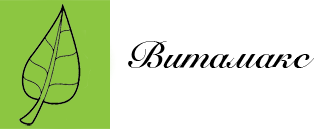
<style>
.page{position:relative;width:322px;height:129px;background:#ffffff}
.page>*{position:absolute;margin:0}
.t1{font:38px "SnellRoundhand-Bold";color:#000000}
</style>
<div class="page">
<p class="t1" style="left:128px;top:41px;width:186px;height:27px">Витамакс</p>
</div>
